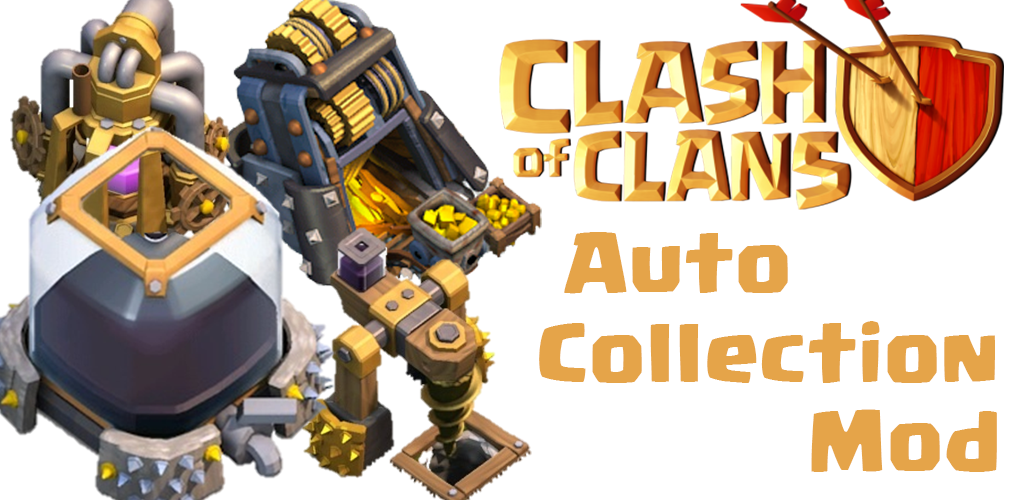
<style>
.page{position:relative;width:1024px;height:500px;background:#ffffff}
.page>*{position:absolute;margin:0}
.t1{font:62.5px "Supercell-Magic";letter-spacing:0.025em;color:#e5a449}
.t2{font:62.7px "Supercell-Magic";letter-spacing:0.025em;color:#e5a449}
</style>
<div class="page">
<p class="t1" style="left:564px;top:232px;width:224px;height:62px">Auto</p>
<p class="t1" style="left:539px;top:321px;width:456px;height:62px">Collection</p>
<p class="t2" style="left:811px;top:409px;width:186px;height:63px">Mod</p>
</div>
